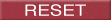
<style>
.page{position:relative;width:111px;height:20px}
.page>*{position:absolute;margin:0}
.t1{font:15.7px "Helvetica";color:#ffffff;scale:1.2 1}
</style>
<div class="page">
<p class="t1" style="left:25px;top:4px;width:61px;height:12px">RESET</p>
</div>
